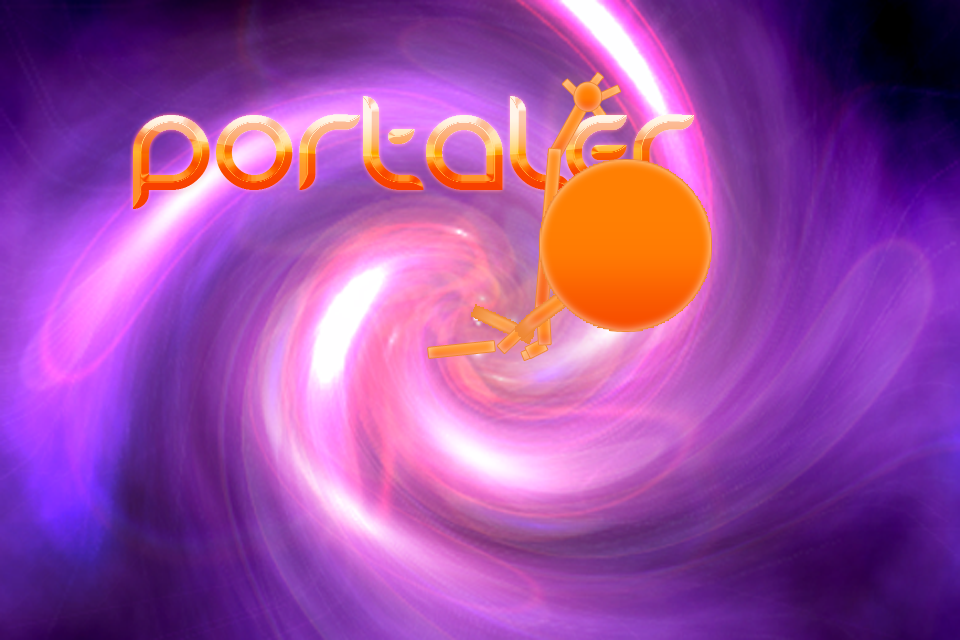
<style>
.page{position:relative;width:960px;height:640px}
.page>*{position:absolute;margin:0}
.t1{font:94.3px "Danube"}
</style>
<div class="page">
<p class="t1" style="left:133px;top:96px;width:561px;height:113px">Portaler</p>
</div>
